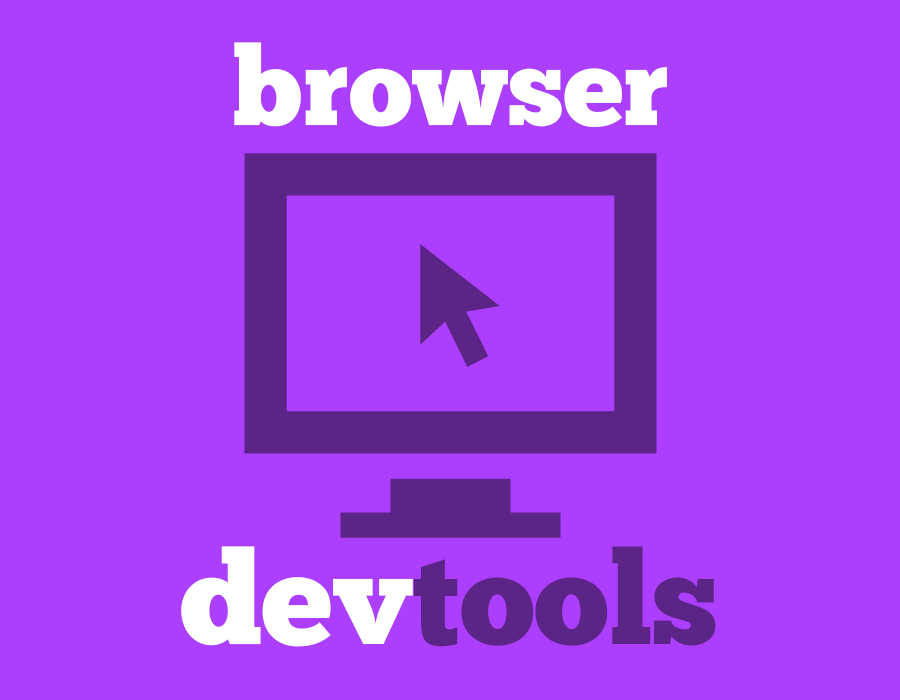
<style>
.page{position:relative;width:900px;height:700px;background:#ac3ffe}
.page>*{position:absolute;margin:0}
.t1{font:110px "ChunkFive-Roman";color:#ffffff}
.t2{font:130px "ChunkFive-Roman";color:#5d2488}
.t3{font:130px "ChunkFive-Roman";color:#ffffff}
</style>
<div class="page">
<p class="t1" style="left:234px;top:42px;width:433px;height:85px">browser</p>
<p class="t2" style="left:181px;top:546px;width:535px;height:101px"><span class="t3">dev</span>tools</p>
</div>
